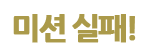
<style>
.page{position:relative;width:149px;height:53px;background:#ffffff}
.page>*{position:absolute;margin:0}
.t1{font:31px "NanumGothicExtraBold";letter-spacing:-0.1em;color:#ab9a4a;font-weight:bold}
</style>
<div class="page">
<p class="t1" style="left:13px;top:14px;width:123px;height:29px">미션 실패!</p>
</div>
